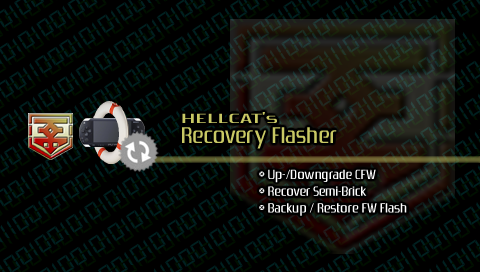
<style>
.page{position:relative;width:480px;height:272px;background:#000000}
.page>*{position:absolute;margin:0}
.t1{font:14px "Zrnic";color:#c8c864;scale:2 1}
.t2{font:24px "Zrnic";color:#c8c864}
.t3{font:14px "Zrnic";color:#ffffff}
</style>
<div class="page">
<p class="t1" style="left:182px;top:112px;width:95px;height:11px">HELLCAT’s</p>
<p class="t2" style="left:182px;top:127px;width:155px;height:22px">Recovery Flasher</p>
<p class="t3" style="left:259px;top:169px;width:148px;height:47px">* Up-/Downgrade CFW<br>* Recover Semi-Brick<br>* Backup / Restore FW Flash</p>
</div>
